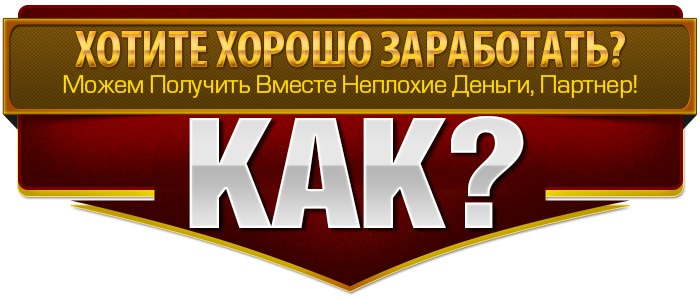
<style>
.page{position:relative;width:700px;height:300px;background:#ffffff}
.page>*{position:absolute;margin:0}
.t1{font:52.6px "MyriadPro-BoldCond";letter-spacing:-0.01em}
.t2{font:24px "Europe";letter-spacing:-0.025em;color:#ffd800}
.t3{font:138.2px "HelveticaInseratCyr-Upright";letter-spacing:-0.025em;scale:1.19 1}
</style>
<div class="page">
<p class="t1" style="left:75px;top:31px;width:550px;height:36px">ХОТИТЕ ХОРОШО ЗАРАБОТАТЬ?</p>
<p class="t2" style="left:63px;top:75px;width:574px;height:23px">Можем Получить Вместе Неплохие Деньги, Партнер!</p>
<p class="t3" style="left:189px;top:116px;width:335px;height:112px">КАК?</p>
</div>
